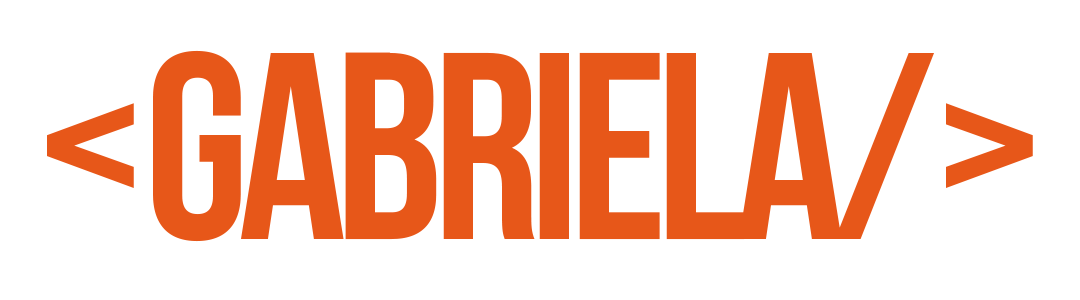
<style>
.page{position:relative;width:1080px;height:300px;background:#ffffff}
.page>*{position:absolute;margin:0}
.t1{font:266.3px "BebasNeueBold";letter-spacing:-0.04em;color:#e75719;text-transform:uppercase}
.t2{font:266.3px "BebasNeueBold";color:#e75719;text-transform:uppercase}
</style>
<div class="page">
<p class="t1" style="left:47px;top:50px;width:986px;height:192px"><span class="t2">&lt;</span>GABRIELA<span class="t2">/&gt;</span></p>
</div>
